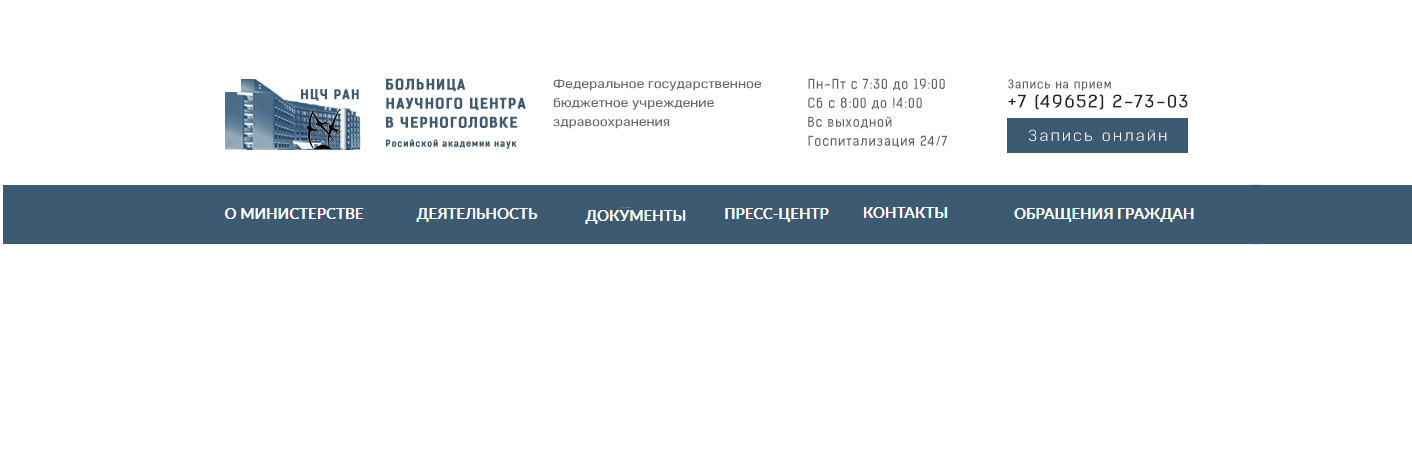
<style>
.page{position:relative;width:1412px;height:456px;background:#ffffff}
.page>*{position:absolute;margin:0}
.t1{font:14px/19px "KelsonSans-BoldRU";letter-spacing:0.075em;color:#3c5b72;text-transform:uppercase;font-weight:bold}
.t2{font:9px/19px "KelsonSans-BoldRU";letter-spacing:0.075em;color:#3c5b72;font-weight:bold}
.t3{font:13px/19px "KelsonSans-RegularRU";letter-spacing:0.075em;color:#606060}
.t4{font:12.8px "KelsonSans-BoldRU";letter-spacing:0.075em;color:#3c5b72;text-transform:uppercase;font-weight:bold}
.t5{font:11.4px/19px "KelsonSans-RegularRU";letter-spacing:-0.005em;color:#6a6a6a;scale:1.3 1}
.t6{font:16.6px/19px "KelsonSans-RegularRU";letter-spacing:0.075em;color:#242424;scale:1.17 1}
.t7{font:12px/19px "KelsonSans-RegularRU";letter-spacing:0.075em;color:#606060}
.t8{font:14.1px "KelsonSans-LightRU";letter-spacing:0.135em;color:#ffffff;scale:1.3 1}
</style>
<div class="page">
<p class="t1" style="left:386px;top:78px;width:140px;height:71px">Больница<br>научного центра <br>в Черноголовке<br><span class="t2">Росийской академии наук</span></p>
<p class="t3" style="left:808px;top:78px;width:139px;height:70px">Пн-Пт с 7:30 до 19:00<br>Сб с 8:00 до !4:00<br>Вс выходной<br>Госпитализация 24/7</p>
<p class="t4" style="left:301px;top:89px;width:58px;height:12px">НЦЧ ран</p>
<p class="t5" style="left:553px;top:79px;width:208px;height:50px">Федеральное государственное<br>бюджетное учреждение<br>здравоохранения</p>
<p class="t6" style="left:1008px;top:79px;width:180px;height:31px"><span class="t7">Запись на прием<br></span>+7 (49652) 2-73-03</p>
<p class="t8" style="left:1029px;top:129px;width:138px;height:12px">Запись онлайн</p>
</div>
